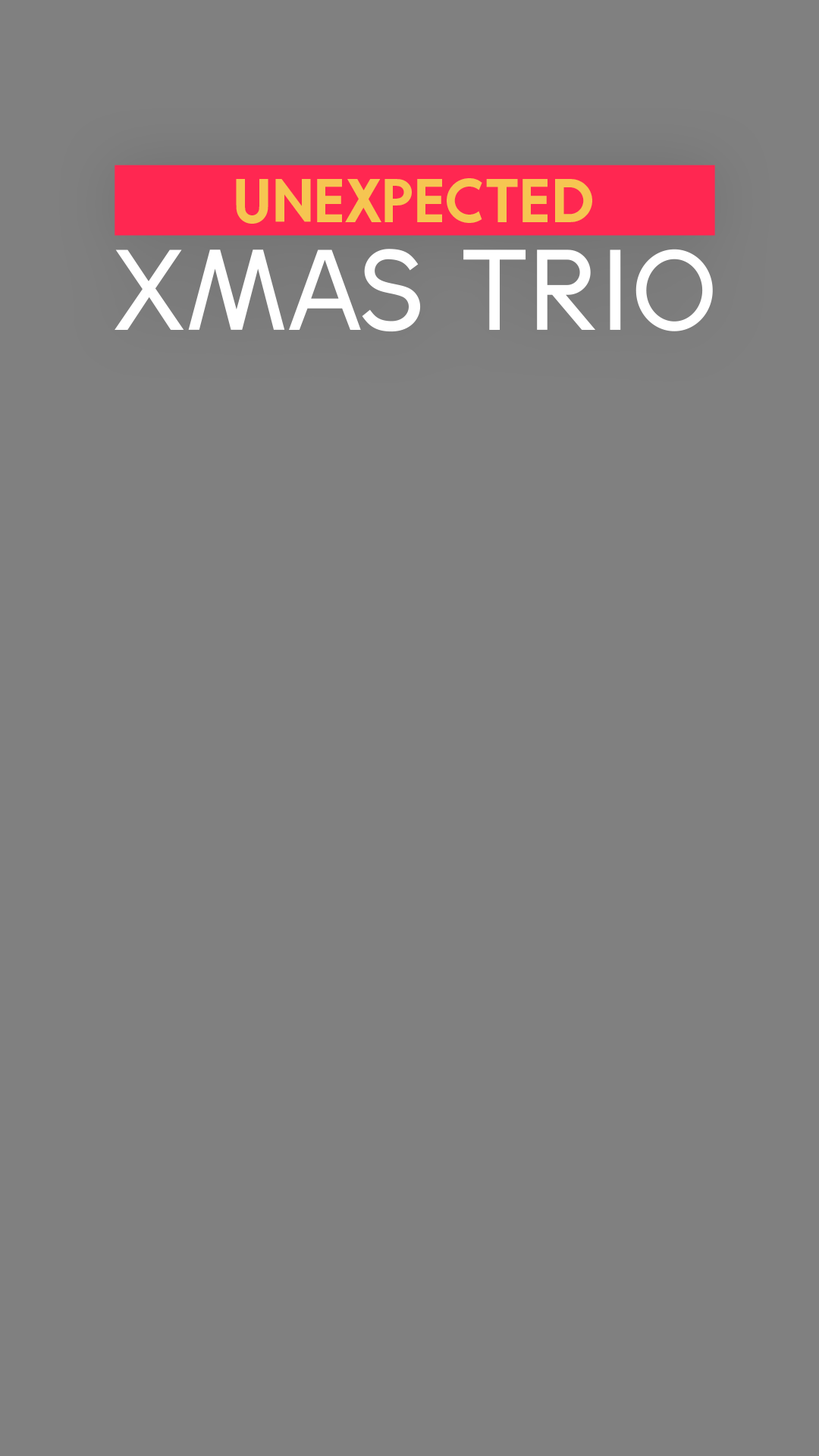
<style>
.page{position:relative;width:819px;height:1456px;background:#808080}
.page>*{position:absolute;margin:0}
.t1{font:56.6px "AliExpresssans-Blod";color:#f6c551}
.t2{font:114.3px "AliExpresssans-Regular";color:#ffffff}
</style>
<div class="page">
<p class="t1" style="left:236px;top:178px;width:356px;height:46px">UNEXPECTED</p>
<p class="t2" style="left:115px;top:249px;width:598px;height:83px">XMAS TRIO</p>
</div>
